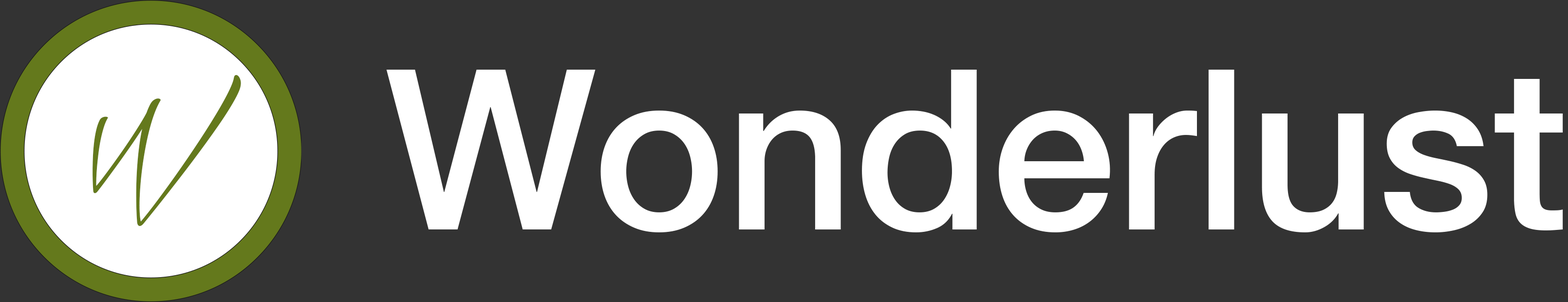
<style>
.page{position:relative;width:1568px;height:302px;background:#333333}
.page>*{position:absolute;margin:0}
.t1{font:224px "HelveticaNeue-Medium";color:#ffffff}
</style>
<div class="page">
<p class="t1" style="left:386px;top:70px;width:1177px;height:162px">Wonderlust</p>
</div>
